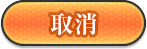
<style>
.page{position:relative;width:147px;height:49px}
.page>*{position:absolute;margin:0}
.t1{font:24px "RyuminPr6N-ExBold";color:#fffbf9}
</style>
<div class="page">
<p class="t1" style="left:50px;top:13px;width:47px;height:22px">取消</p>
</div>
